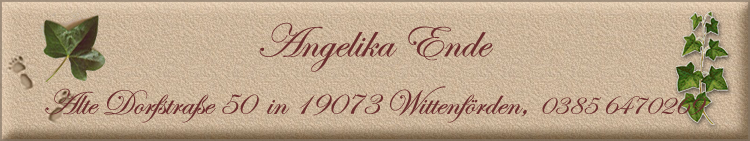
<style>
.page{position:relative;width:750px;height:141px}
.page>*{position:absolute;margin:0}
.t1{font:36px "EdwardianScriptITC";color:#6b2e2e}
.t2{font:48px "EdwardianScriptITC";color:#6b2e2e}
.t3{font:30px "EdwardianScriptITC";color:#6b2e2e}
</style>
<div class="page">
<p class="t1" style="left:45px;top:22px;width:661px;height:101px;text-align:center"><span class="t2">Angelika Ende<br></span>Alte Dorfstraße 50  in 19073 Wittenförden<span class="t2">, </span><span class="t3">0385 6470269</span></p>
</div>
